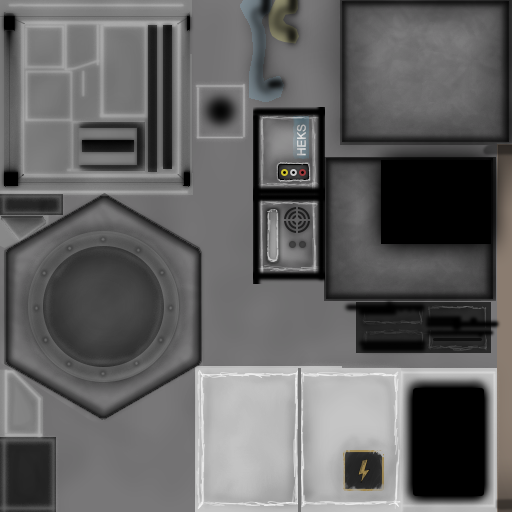
<style>
.page{position:relative;width:512px;height:512px}
.page>*{position:absolute;margin:0}
.t1{font:12px "ArialMT";color:#d1d0d1}
</style>
<div class="page">
<p class="t1" style="left:296px;top:124px;width:10px;height:32px;rotate:-90deg">HEKS</p>
</div>
